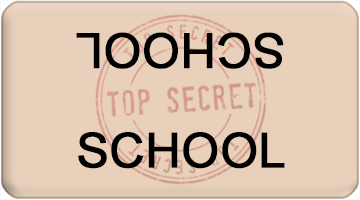
<style>
.page{position:relative;width:360px;height:200px;background:#e8d0bb}
.page>*{position:absolute;margin:0}
.t1{font:48px "ArialMT";color:#000000;font-weight:bold}
</style>
<div class="page">
<p class="t1" style="left:76px;top:32px;width:208px;height:37px;rotate:180deg">SCHOOL</p>
<p class="t1" style="left:78px;top:132px;width:207px;height:37px">SCHOOL</p>
</div>
